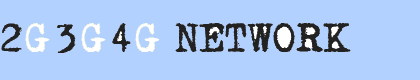
<style>
.page{position:relative;width:420px;height:80px;background:#b3d1ff}
.page>*{position:absolute;margin:0}
.t1{font:36px "MomsTypewriter";color:#222222}
.t2{font:36px "MomsTypewriter";color:#ffffff}
</style>
<div class="page">
<p class="t1" style="left:1px;top:23px;width:21px;height:29px">2</p>
<p class="t2" style="left:25px;top:23px;width:25px;height:29px">G</p>
<p class="t1" style="left:57px;top:24px;width:19px;height:29px">3</p>
<p class="t2" style="left:81px;top:23px;width:25px;height:29px">G</p>
<p class="t1" style="left:112px;top:23px;width:19px;height:29px">4</p>
<p class="t2" style="left:135px;top:23px;width:25px;height:29px">G</p>
<p class="t1" style="left:175px;top:23px;width:176px;height:29px">NETWORK</p>
</div>
